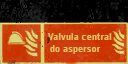
<style>
.page{position:relative;width:128px;height:64px}
.page>*{position:absolute;margin:0}
.t1{font:10.3px "ZurichBT-BoldCondensed";letter-spacing:0.02em;color:#dec363}
</style>
<div class="page">
<p class="t1" style="left:48px;top:33px;width:64px;height:7px">Valvula central</p>
<p class="t1" style="left:50px;top:45px;width:51px;height:9px">do aspersor</p>
</div>
